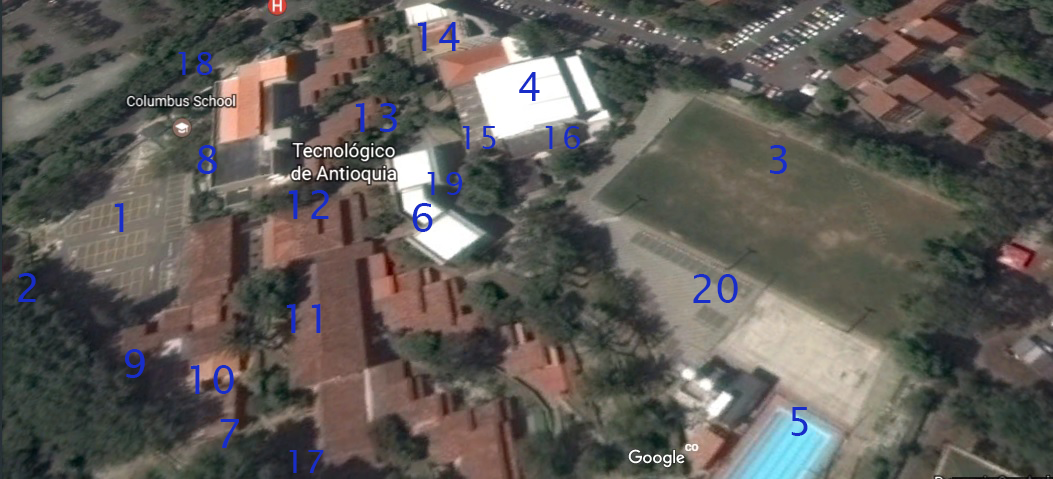
<style>
.page{position:relative;width:1053px;height:479px}
.page>*{position:absolute;margin:0}
.t1{font:40px "LucidaSans";color:#182dc9}
.t2{font:32px "LucidaSans";color:#182dc9}
</style>
<div class="page">
<p class="t1" style="left:417px;top:22px;width:43px;height:29px">14</p>
<p class="t2" style="left:178px;top:52px;width:35px;height:23px">18</p>
<p class="t1" style="left:519px;top:72px;width:21px;height:29px">4</p>
<p class="t1" style="left:355px;top:103px;width:42px;height:29px">13</p>
<p class="t2" style="left:462px;top:126px;width:34px;height:23px">15</p>
<p class="t2" style="left:545px;top:126px;width:35px;height:23px">16</p>
<p class="t1" style="left:197px;top:145px;width:20px;height:29px">8</p>
<p class="t1" style="left:770px;top:145px;width:17px;height:29px">3</p>
<p class="t2" style="left:427px;top:172px;width:36px;height:23px">19</p>
<p class="t1" style="left:288px;top:190px;width:41px;height:29px">12</p>
<p class="t1" style="left:114px;top:203px;width:10px;height:29px">1</p>
<p class="t1" style="left:412px;top:203px;width:21px;height:29px">6</p>
<p class="t1" style="left:18px;top:273px;width:18px;height:29px">2</p>
<p class="t1" style="left:693px;top:274px;width:45px;height:29px">20</p>
<p class="t1" style="left:286px;top:304px;width:35px;height:29px">11</p>
<p class="t1" style="left:125px;top:349px;width:20px;height:29px">9</p>
<p class="t1" style="left:190px;top:365px;width:44px;height:29px">10</p>
<p class="t1" style="left:791px;top:407px;width:17px;height:29px">5</p>
<p class="t1" style="left:220px;top:419px;width:19px;height:29px">7</p>
<p class="t2" style="left:289px;top:450px;width:35px;height:23px">17</p>
</div>
